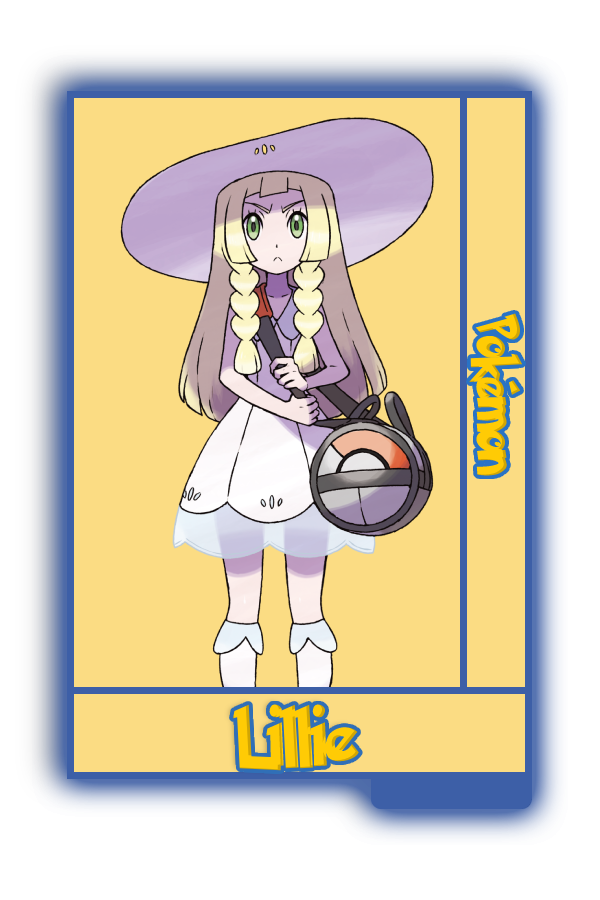
<style>
.page{position:relative;width:600px;height:900px;background:#fbdc83}
.page>*{position:absolute;margin:0}
.t1{font:48.8px "PokemonSolidNormal";color:#ffcb05;scale:0.8 1}
.t2{font:60.1px "PokemonSolidNormal";color:#ffcb05;scale:0.96 1}
</style>
<div class="page">
<p class="t1" style="left:469px;top:313px;width:54px;height:163px;rotate:90deg">Pokémon</p>
<p class="t2" style="left:233px;top:704px;width:126px;height:67px">Lillie</p>
</div>
